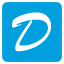
<style>
.page{position:relative;width:64px;height:64px;background:#00a0de}
.page>*{position:absolute;margin:0}
.t1{font:58.8px "STXingkai";color:#ffffff}
</style>
<div class="page">
<p class="t1" style="left:12px;top:12px;width:39px;height:40px">D</p>
</div>
